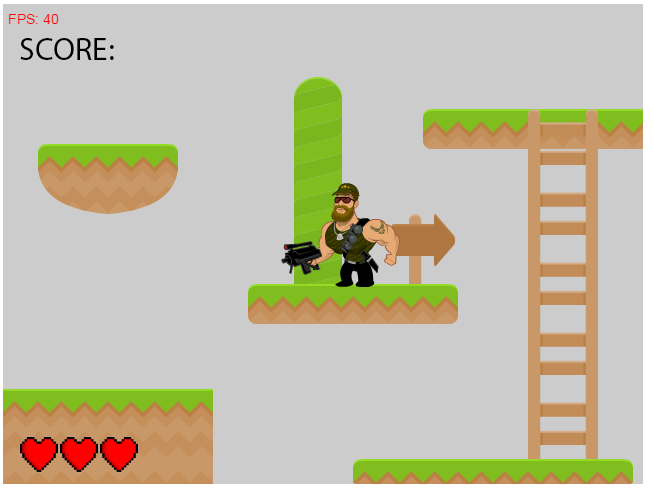
<style>
.page{position:relative;width:654px;height:489px;background:#cccccc}
.page>*{position:absolute;margin:0}
.t1{font:32px "MyriadPro-Regular";color:#000000}
</style>
<div class="page">
<p class="t1" style="left:20px;top:38px;width:94px;height:22px">SCORE:</p>
</div>
